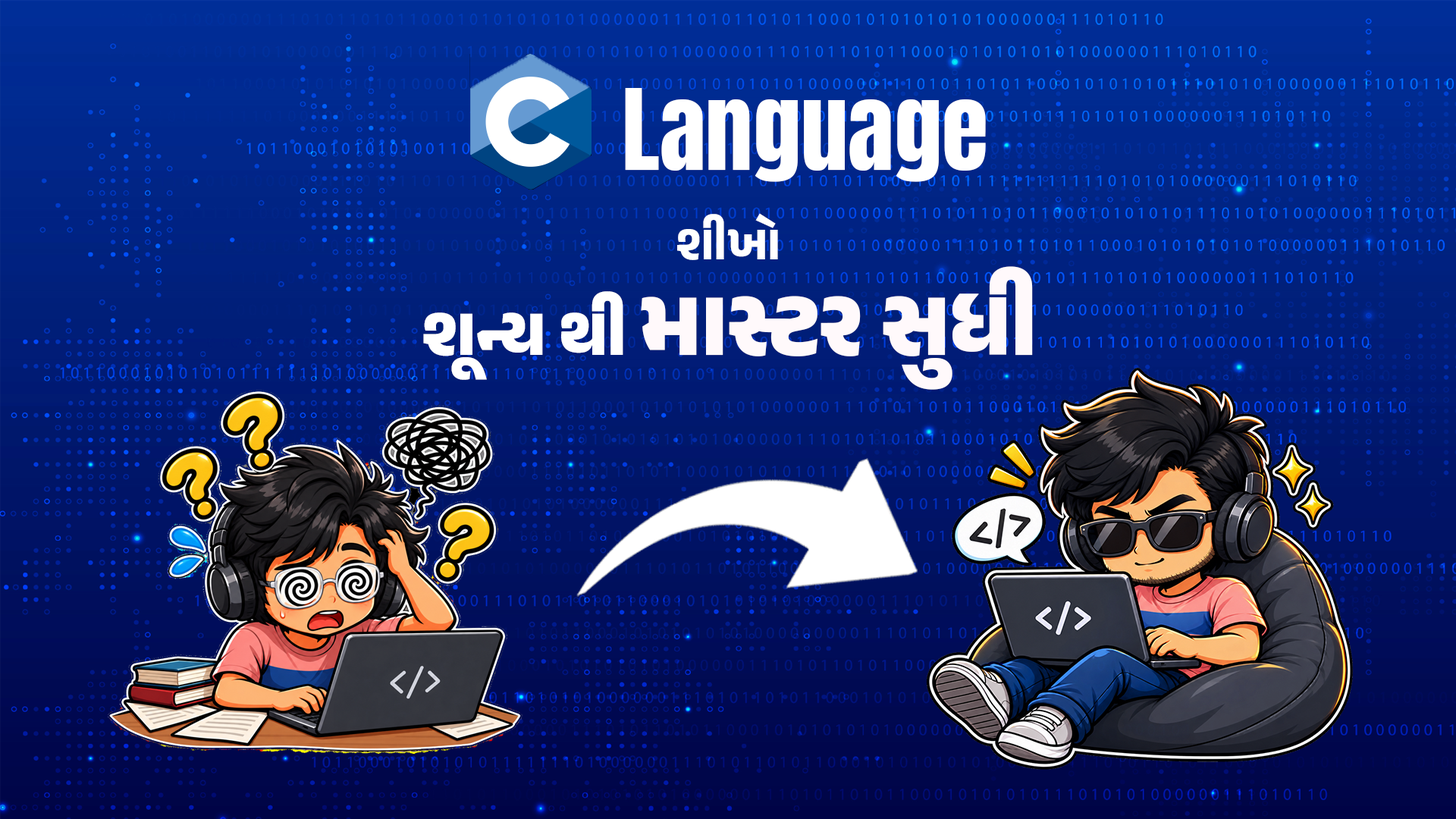
<style>
.page{position:relative;width:1456px;height:819px}
.page>*{position:absolute;margin:0}
.t1{font:94.8px "Anton-Regular";color:#ffffff}
.t2{font:49.3px "AnekGujarati-Bold";color:#ffffff}
.t3{font:94.8px "AnekGujarati-ExtraBold";color:#fff9fb}
.t4{font:68.2px "AnekGujarati-ExtraBold";color:#ffffff}
</style>
<div class="page">
<p class="t1" style="left:625px;top:88px;width:361px;height:94px">Language</p>
<p class="t2" style="left:677px;top:213px;width:101px;height:47px">શીખો</p>
<p class="t3" style="left:641px;top:266px;width:392px;height:124px">માસ્ટર સુધી</p>
<p class="t4" style="left:423px;top:291px;width:200px;height:89px">શૂન્ય થી</p>
</div>
